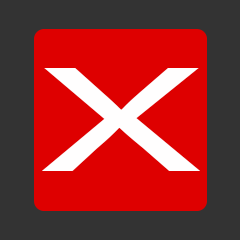
<style>
.page{position:relative;width:240px;height:240px;background:#333333}
.page>*{position:absolute;margin:0}
.t1{font:152.4px "MyriadPro-Regular";color:#fffefe;scale:1.99 1}
</style>
<div class="page">
<p class="t1" style="left:42px;top:68px;width:158px;height:103px">X</p>
</div>
